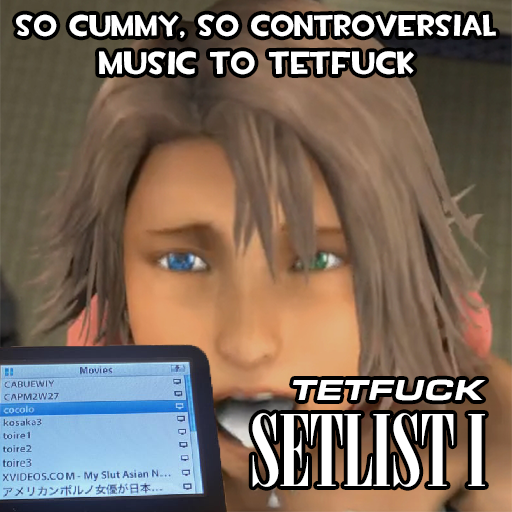
<style>
.page{position:relative;width:512px;height:512px}
.page>*{position:absolute;margin:0}
.t1{font:30px "TF2Build";color:#ffffff}
.t2{font:32px "TF2Build";color:#ffffff}
.t3{font:30px "EurostileExt-BlaIta";color:#ffffff}
.t4{font:98px "Nirvana";color:#ffffff}
</style>
<div class="page">
<p class="t1" style="left:16px;top:14px;width:480px;height:24px">SO CUMMY, SO CONTROVERSIAL</p>
<p class="t2" style="left:99px;top:51px;width:315px;height:24px">MUSIC TO TETFUCK</p>
<p class="t3" style="left:293px;top:379px;width:193px;height:22px">TETFUCK</p>
<p class="t4" style="left:252px;top:413px;width:233px;height:74px">SETLIST I</p>
</div>
